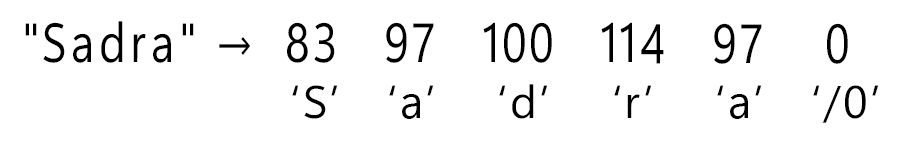
<style>
.page{position:relative;width:915px;height:150px;background:#ffffff}
.page>*{position:absolute;margin:0}
.t1{font:55px "SegoeUIVariable";letter-spacing:0.05em;color:#000000;scale:0.83 1}
.t2{font:55px "SegoeUIVariable";letter-spacing:0.1em;color:#000000;scale:0.83 1}
.t3{font:45.8px "SegoeUIVariable";letter-spacing:0.05em;color:#000000}
</style>
<div class="page">
<p class="t1" style="left:25px;top:21px;width:823px;height:43px">"<span class="t2">Sadra</span>" →  83   97   100   114   97    0</p>
<p class="t3" style="left:292px;top:84px;width:587px;height:39px">‘S’   ‘a’    ‘d’    ‘r’    ‘a’   ‘/0’</p>
</div>
